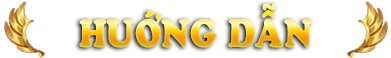
<style>
.page{position:relative;width:391px;height:58px;background:#ffffff}
.page>*{position:absolute;margin:0}
.t1{font:41.1px "UTM-Cooper-Black";scale:0.83 1}
</style>
<div class="page">
<p class="t1" style="left:79px;top:3px;width:233px;height:45px">HUỚNG DẪN</p>
</div>
